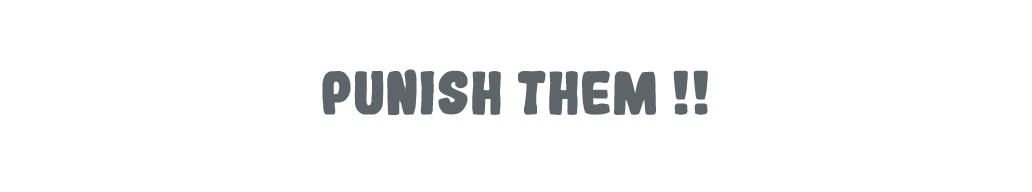
<style>
.page{position:relative;width:1032px;height:192px;background:#ffffff}
.page>*{position:absolute;margin:0}
.t1{font:58.3px "Gogono-Cocoa-Mochi";color:#5e6569}
</style>
<div class="page">
<p class="t1" style="left:322px;top:69px;width:386px;height:47px">Punish them !!</p>
</div>
